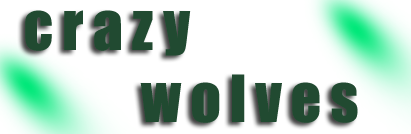
<style>
.page{position:relative;width:411px;height:134px;background:#ffffff}
.page>*{position:absolute;margin:0}
.t1{font:60px "Impact";letter-spacing:0.15em;color:#214a31}
</style>
<div class="page">
<p class="t1" style="left:25px;top:10px;width:333px;height:113px;text-align:right">crazy <br>       wolves</p>
</div>
